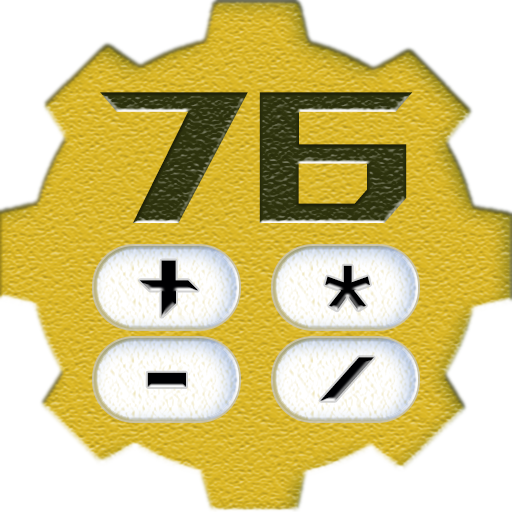
<style>
.page{position:relative;width:512px;height:512px;background:#ffffff}
.page>*{position:absolute;margin:0}
.t1{font:300px "ROGFontsv1.6-Regular";color:#2f340e}
.t2{font:150px "ROGFontsv1.6-Regular";color:#000002}
.t3{font:200px "ROGFontsv1.6-Regular";color:#000002}
</style>
<div class="page">
<p class="t1" style="left:100px;top:92px;width:313px;height:131px">76</p>
<p class="t2" style="left:139px;top:260px;width:59px;height:57px">+</p>
<p class="t3" style="left:325px;top:265px;width:45px;height:46px">*</p>
<p class="t2" style="left:320px;top:357px;width:54px;height:44px">/</p>
<p class="t2" style="left:147px;top:372px;width:39px;height:15px">-</p>
</div>
